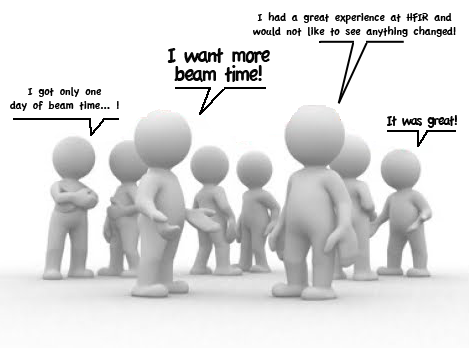
<style>
.page{position:relative;width:469px;height:348px;background:#ffffff}
.page>*{position:absolute;margin:0}
.t1{font:12px/14px "AppleCasual";letter-spacing:-0.04em;color:#000000}
.t2{font:23px/19px "AppleCasual";letter-spacing:-0.12em;color:#060606}
.t3{font:15px "AppleCasual";letter-spacing:-0.12em;color:#000000}
</style>
<div class="page">
<p class="t1" style="left:253px;top:12px;width:203px;height:25px;text-align:center">I had a great experience at HFIR and<br>would not like to see anything changed!</p>
<p class="t2" style="left:167px;top:48px;width:103px;height:34px;text-align:center">I want more<br>beam time!</p>
<p class="t1" style="left:10px;top:87px;width:109px;height:24px;text-align:center">I got only one<br>day of beam time... !</p>
<p class="t3" style="left:387px;top:115px;width:70px;height:13px">It was great!</p>
</div>
